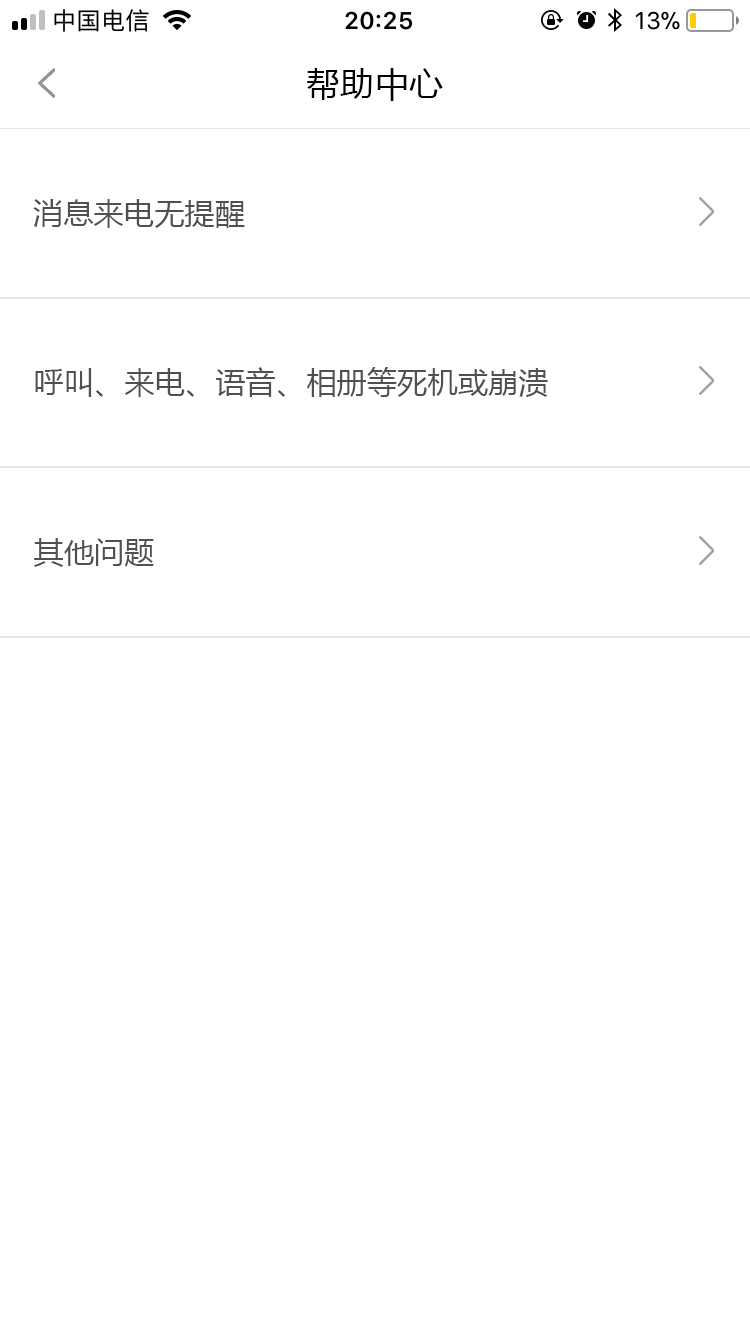
<style>
.page{position:relative;width:750px;height:1334px;background:#ffffff}
.page>*{position:absolute;margin:0}
.t1{font:34px "MicrosoftYaHei";letter-spacing:0.01em;color:#000000}
.t2{font:30px "MicrosoftYaHei";letter-spacing:0.01em;color:#505050}
</style>
<div class="page">
<p class="t1" style="left:307px;top:68px;width:136px;height:33px">帮助中心</p>
<p class="t2" style="left:33px;top:199px;width:212px;height:29px">消息来电无提醒</p>
<p class="t2" style="left:35px;top:367px;width:513px;height:30px">呼叫、来电、语音、相册等死机或崩溃</p>
<p class="t2" style="left:34px;top:538px;width:120px;height:29px">其他问题</p>
</div>
